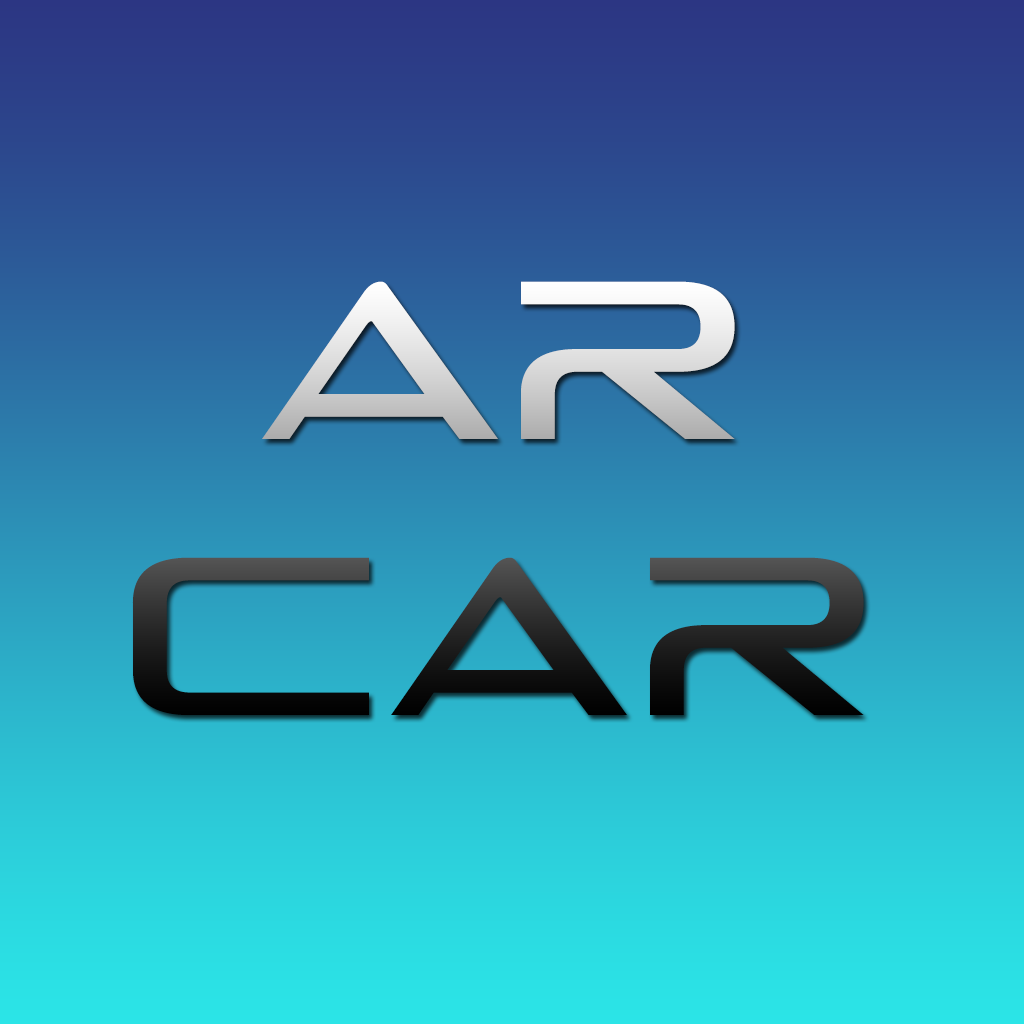
<style>
.page{position:relative;width:1024px;height:1024px}
.page>*{position:absolute;margin:0}
.t1{font:230px "TheRaveIsInYourPants"}
</style>
<div class="page">
<p class="t1" style="left:132px;top:281px;width:732px;height:434px;text-align:center">AR<br>CAR</p>
</div>
